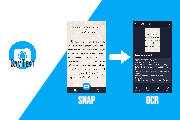
<style>
.page{position:relative;width:180px;height:120px;background:#03a9f5}
.page>*{position:absolute;margin:0}
.t1{font:10.5px "BebasNeue-Regular";color:#ffffff}
</style>
<div class="page">
<p class="t1" style="left:78px;top:96px;width:17px;height:8px">Snap</p>
<p class="t1" style="left:146px;top:96px;width:13px;height:8px">OCR</p>
</div>
